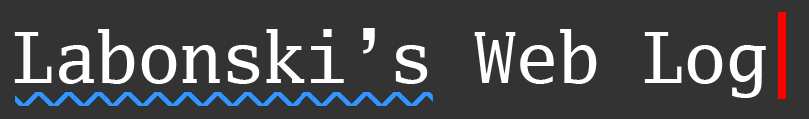
<style>
.page{position:relative;width:809px;height:119px;background:#333333}
.page>*{position:absolute;margin:0}
.t1{font:70px "GoMono";color:#ffffff}
</style>
<div class="page">
<p class="t1" style="left:14px;top:28px;width:752px;height:70px">Labonski’s Web Log</p>
</div>
